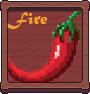
<style>
.page{position:relative;width:90px;height:94px;background:#853a3a}
.page>*{position:absolute;margin:0}
.t1{font:18px "MaturaMTScriptCapitals";color:#f49e2f}
</style>
<div class="page">
<p class="t1" style="left:6px;top:12px;width:42px;height:17px">Fire</p>
</div>
